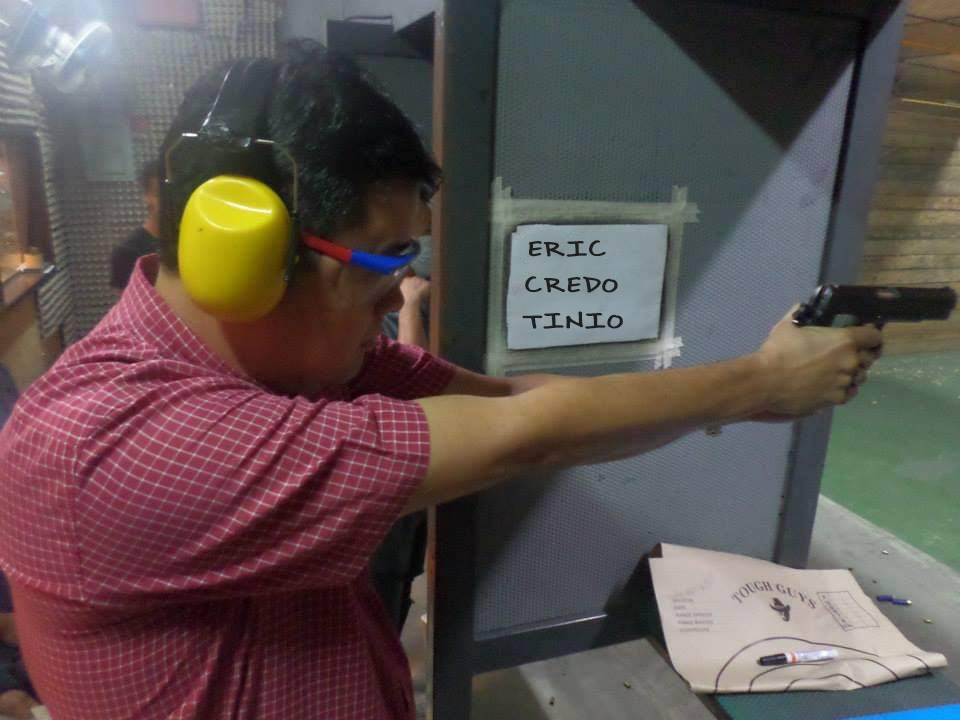
<style>
.page{position:relative;width:960px;height:720px}
.page>*{position:absolute;margin:0}
.t1{font:30.1px "BrownBagLunch";color:#201f1f;scale:1.46 1}
</style>
<div class="page">
<p class="t1" style="left:522px;top:240px;width:101px;height:89px">ERIC <br>CREDO <br>TINIO</p>
</div>
